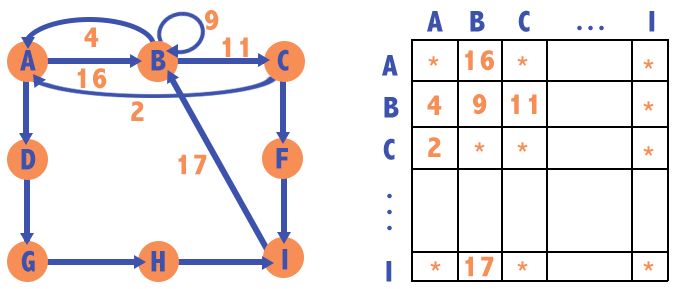
<style>
.page{position:relative;width:673px;height:289px;background:#ffffff}
.page>*{position:absolute;margin:0}
.t1{font:30px "AbadiMT-CondensedExtraBold";letter-spacing:0.075em;color:#f68e56}
.t2{font:30px "AbadiMT-CondensedExtraBold";letter-spacing:0.075em;color:#3d52ac}
</style>
<div class="page">
<p class="t1" style="left:205px;top:10px;width:14px;height:20px">9</p>
<p class="t2" style="left:427px;top:11px;width:16px;height:21px">A</p>
<p class="t2" style="left:470px;top:11px;width:15px;height:21px">B</p>
<p class="t2" style="left:518px;top:10px;width:12px;height:22px">C</p>
<p class="t2" style="left:649px;top:11px;width:6px;height:21px">I</p>
<p class="t1" style="left:84px;top:27px;width:15px;height:20px">4</p>
<p class="t2" style="left:577px;top:25px;width:27px;height:6px">...</p>
<p class="t1" style="left:222px;top:37px;width:26px;height:20px">11</p>
<p class="t2" style="left:20px;top:50px;width:16px;height:21px">A</p>
<p class="t2" style="left:151px;top:50px;width:15px;height:21px">B</p>
<p class="t2" style="left:277px;top:49px;width:12px;height:22px">C</p>
<p class="t1" style="left:465px;top:50px;width:29px;height:21px">16</p>
<p class="t2" style="left:382px;top:55px;width:16px;height:21px">A</p>
<p class="t1" style="left:428px;top:56px;width:11px;height:10px">*</p>
<p class="t1" style="left:517px;top:56px;width:11px;height:10px">*</p>
<p class="t1" style="left:643px;top:59px;width:11px;height:10px">*</p>
<p class="t1" style="left:77px;top:68px;width:30px;height:21px">16</p>
<p class="t1" style="left:131px;top:101px;width:13px;height:20px">2</p>
<p class="t2" style="left:384px;top:97px;width:15px;height:21px">B</p>
<p class="t1" style="left:427px;top:95px;width:15px;height:20px">4</p>
<p class="t1" style="left:473px;top:94px;width:14px;height:20px">9</p>
<p class="t1" style="left:511px;top:94px;width:26px;height:20px">11</p>
<p class="t1" style="left:643px;top:101px;width:11px;height:10px">*</p>
<p class="t1" style="left:428px;top:137px;width:13px;height:20px">2</p>
<p class="t2" style="left:21px;top:149px;width:15px;height:21px">D</p>
<p class="t2" style="left:276px;top:148px;width:12px;height:21px">F</p>
<p class="t2" style="left:383px;top:138px;width:12px;height:22px">C</p>
<p class="t1" style="left:474px;top:142px;width:11px;height:10px">*</p>
<p class="t1" style="left:517px;top:142px;width:11px;height:10px">*</p>
<p class="t1" style="left:643px;top:146px;width:11px;height:10px">*</p>
<p class="t1" style="left:178px;top:154px;width:29px;height:21px">17</p>
<p class="t2" style="left:387px;top:193px;width:5px;height:6px">.</p>
<p class="t2" style="left:387px;top:209px;width:5px;height:6px">.</p>
<p class="t2" style="left:387px;top:225px;width:5px;height:6px">.</p>
<p class="t2" style="left:21px;top:250px;width:14px;height:22px">G</p>
<p class="t2" style="left:151px;top:251px;width:14px;height:21px">H</p>
<p class="t2" style="left:282px;top:249px;width:6px;height:21px">I</p>
<p class="t1" style="left:465px;top:256px;width:29px;height:21px">17</p>
<p class="t2" style="left:386px;top:261px;width:6px;height:21px">I</p>
<p class="t1" style="left:430px;top:261px;width:11px;height:10px">*</p>
<p class="t1" style="left:517px;top:261px;width:11px;height:10px">*</p>
<p class="t1" style="left:643px;top:261px;width:11px;height:10px">*</p>
</div>
